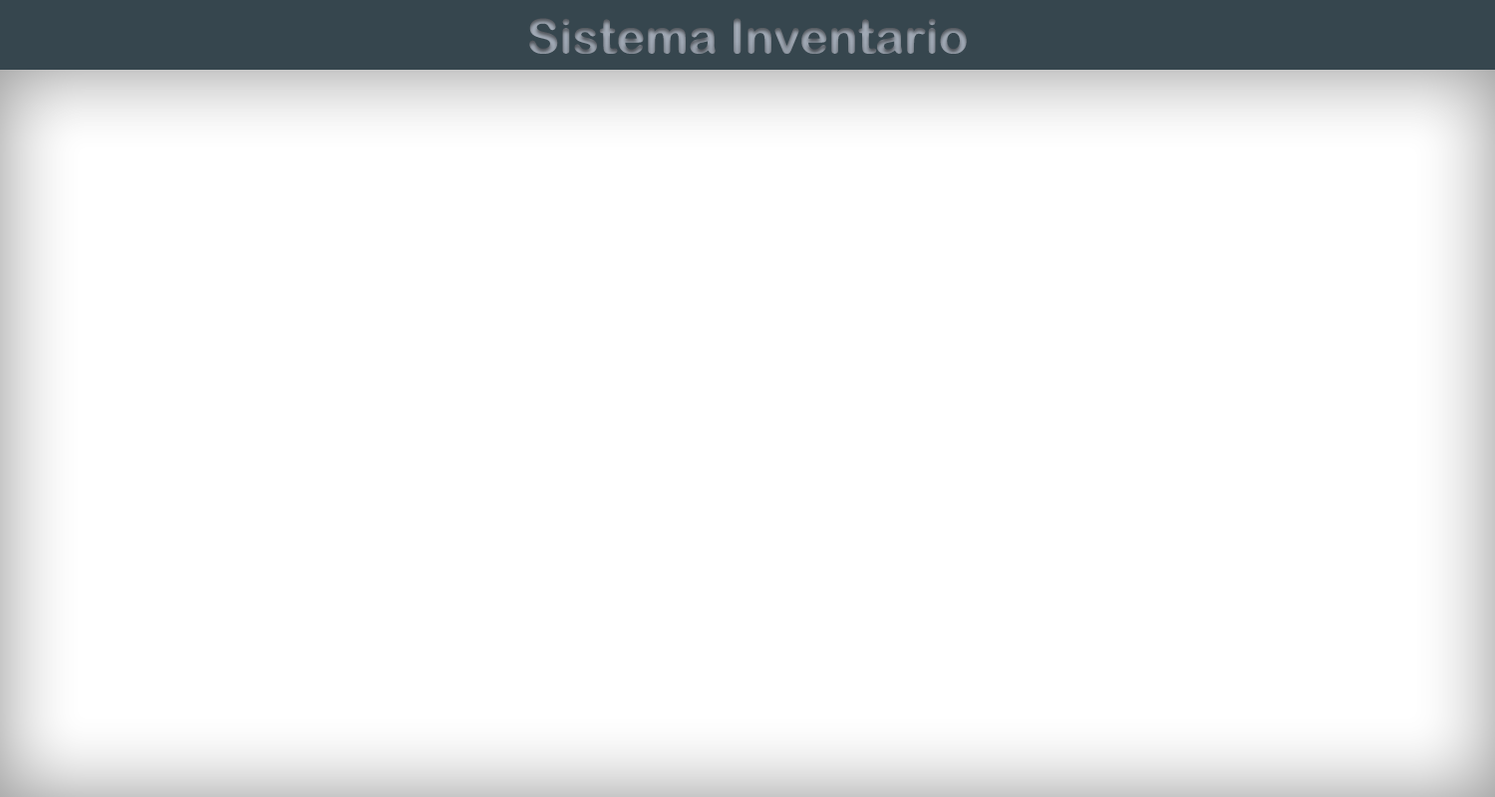
<style>
.page{position:relative;width:1495px;height:797px;background:#ffffff}
.page>*{position:absolute;margin:0}
.t1{font:47.6px "ArialRoundedMTBold"}
</style>
<div class="page">
<p class="t1" style="left:529px;top:18px;width:438px;height:36px">Sistema Inventario</p>
</div>
